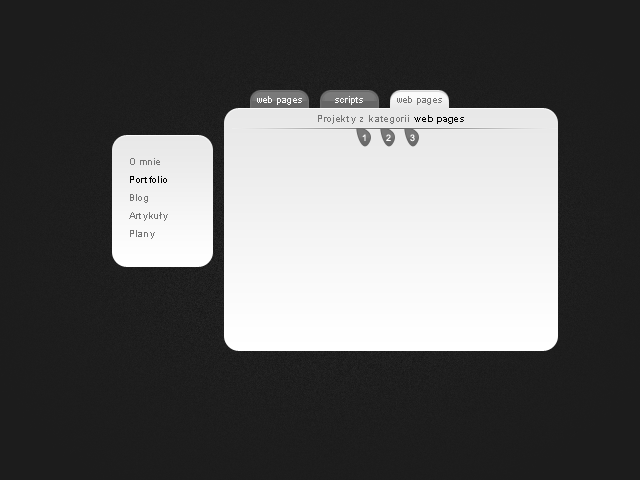
<style>
.page{position:relative;width:640px;height:480px;background:#1c1c1c}
.page>*{position:absolute;margin:0}
.t1{font:9px "ArialMT";letter-spacing:0.025em;color:#ffffff}
.t2{font:9px "ArialMT";letter-spacing:0.025em;color:#747474}
.t3{font:9px "ArialMT";letter-spacing:0.075em;color:#747474}
.t4{font:9px "Arial-BoldMT";letter-spacing:0.075em;color:#000000}
.t5{font:9px "ArialMT";letter-spacing:0.075em;color:#ffffff}
.t6{font:9px/18px "ArialMT";letter-spacing:0.075em;color:#747474}
.t7{font:9px/18px "ArialMT";letter-spacing:0.075em;color:#000000}
</style>
<div class="page">
<p class="t1" style="left:257px;top:96px;width:45px;height:9px">web pages</p>
<p class="t1" style="left:335px;top:96px;width:28px;height:9px">scripts</p>
<p class="t2" style="left:397px;top:96px;width:45px;height:9px">web pages</p>
<p class="t3" style="left:318px;top:115px;width:146px;height:9px">Projekty z kategorii <span class="t4">web pages</span></p>
<p class="t5" style="left:362px;top:134px;width:4px;height:7px">1</p>
<p class="t5" style="left:386px;top:134px;width:5px;height:7px">2</p>
<p class="t5" style="left:410px;top:134px;width:5px;height:8px">3</p>
<p class="t6" style="left:129px;top:158px;width:39px;height:81px">O mnie<br><span class="t7">Portfolio<br></span>Blog<br>Artykuły<br>Plany</p>
</div>
